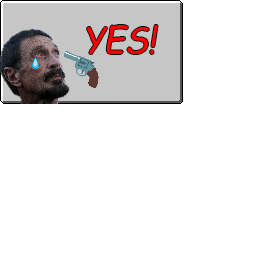
<style>
.page{position:relative;width:256px;height:256px;background:#ffffff}
.page>*{position:absolute;margin:0}
.t1{font:34.3px "ComicSansMS-Italic";letter-spacing:-0.02em;color:#ff0000}
</style>
<div class="page">
<p class="t1" style="left:87px;top:25px;width:71px;height:29px">YES!</p>
</div>
